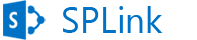
<style>
.page{position:relative;width:197px;height:40px;background:#ffffff}
.page>*{position:absolute;margin:0}
.t1{font:35.6px "SegoeUI";color:#0072c6}
</style>
<div class="page">
<p class="t1" style="left:63px;top:6px;width:100px;height:27px">SPLink</p>
</div>
